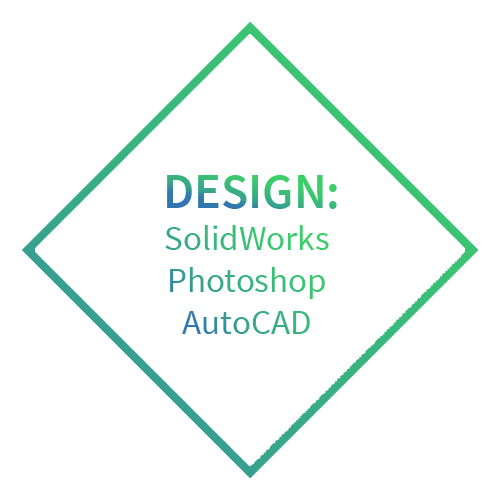
<style>
.page{position:relative;width:500px;height:500px;background:#ffffff}
.page>*{position:absolute;margin:0}
.t1{font:50.3px "SourceSansPro-SemiBold"}
.t2{font:35px "SourceSansPro-Regular"}
</style>
<div class="page">
<p class="t1" style="left:167px;top:175px;width:170px;height:34px">DESIGN:</p>
<p class="t2" style="left:165px;top:225px;width:164px;height:109px;text-align:center">SolidWorks<br>Photoshop<br>AutoCAD</p>
</div>
